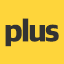
<style>
.page{position:relative;width:64px;height:64px;background:#fed53b}
.page>*{position:absolute;margin:0}
.t1{font:32px "AppleSDGothicNeoH00";letter-spacing:-0.06em;color:#333333}
</style>
<div class="page">
<p class="t1" style="left:5px;top:18px;width:54px;height:29px">plus</p>
</div>
